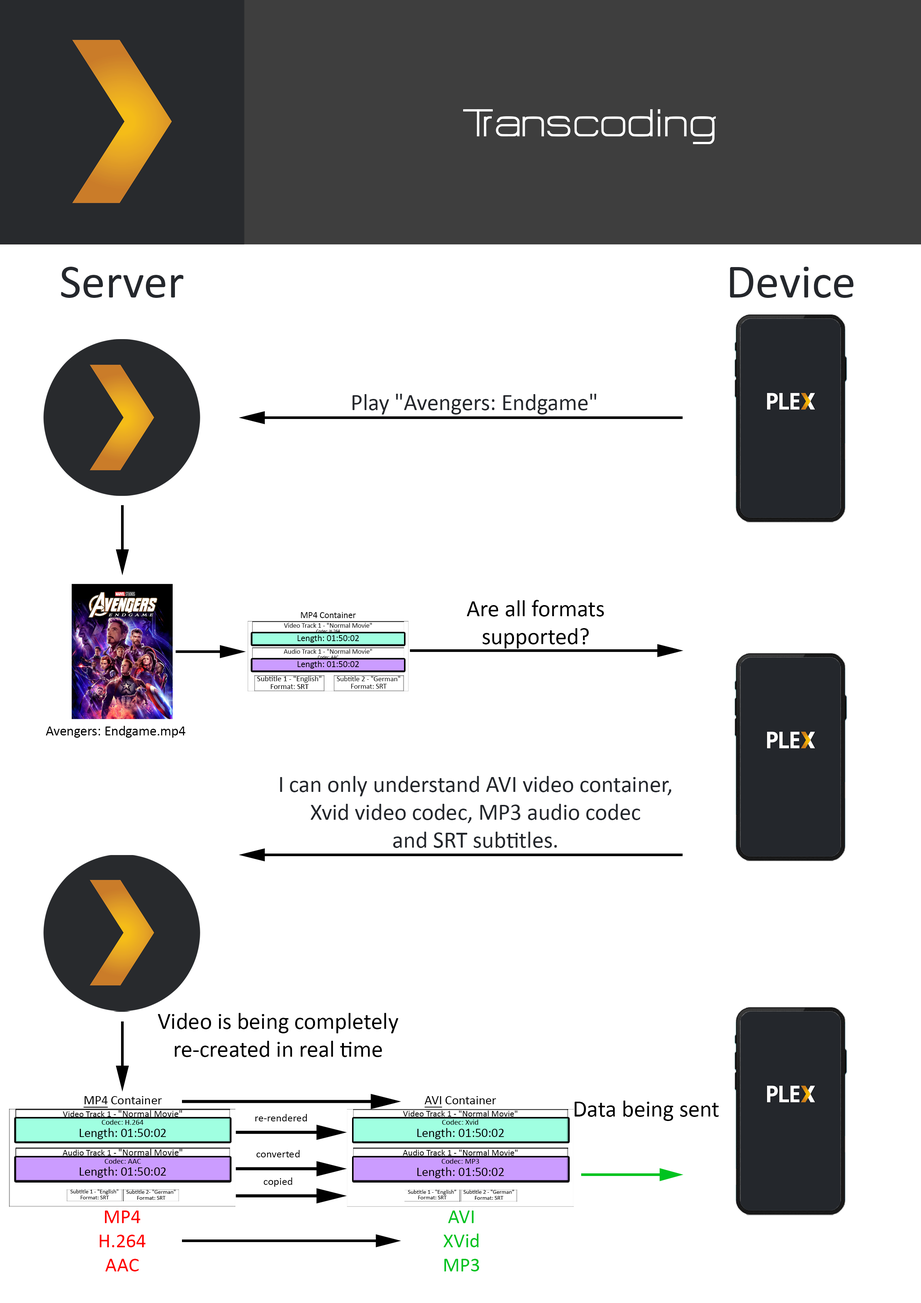
<style>
.page{position:relative;width:921px;height:1303px;background:#ffffff}
.page>*{position:absolute;margin:0}
.t1{font:48px "HURTMOLDPersonalUse-Regular";color:#ffffff}
.t2{font:48px "Calibri";color:#24272c}
.t3{font:23.2px "Calibri";color:#24272c}
.t4{font:23.2px "Calibri";color:#000000}
.t5{font:9.1px "Calibri";color:#000000}
.t6{font:6.9px "Calibri";color:#000000}
.t7{font:4.4px "Calibri";color:#000000}
.t8{font:7.8px "Calibri";color:#000000}
.t9{font:7.4px "Calibri";color:#000000}
.t10{font:13.9px "Calibri";color:#000000}
.t11{font:12.9px "Calibri";color:#000000}
.t12{font:12.9px "Calibri";color:#000000;text-decoration:underline}
.t13{font:9px "Calibri";color:#000000}
.t14{font:9.8px "Calibri";color:#000000}
.t15{font:10.9px "Calibri";color:#000000}
.t16{font:5.9px "Calibri";color:#000000}
.t17{font:20.1px "Calibri";color:#ff0000}
.t18{font:20.1px "Calibri";color:#00c320}
</style>
<div class="page">
<p class="t1" style="left:463px;top:109px;width:253px;height:35px">Transcoding</p>
<p class="t2" style="left:61px;top:267px;width:123px;height:31px">Server</p>
<p class="t2" style="left:730px;top:267px;width:124px;height:31px">Device</p>
<p class="t3" style="left:353px;top:394px;width:244px;height:21px">Play "Avengers: Endgame"</p>
<p class="t4" style="left:467px;top:600px;width:137px;height:49px;text-align:center">Are all formats<br>supported?</p>
<p class="t5" style="left:301px;top:612px;width:55px;height:6px">MP4 Container</p>
<p class="t6" style="left:284px;top:623px;width:88px;height:5px">Video Track 1 - "Normal Movie"</p>
<p class="t7" style="left:316px;top:630px;width:24px;height:3px">Codec: H.264</p>
<p class="t5" style="left:298px;top:635px;width:61px;height:8px">Length: 01:50:02</p>
<p class="t6" style="left:284px;top:649px;width:88px;height:5px">Audio Track 1 - "Normal Movie"</p>
<p class="t5" style="left:298px;top:661px;width:61px;height:8px">Length: 01:50:02</p>
<p class="t7" style="left:318px;top:656px;width:21px;height:3px">Codec: AAC</p>
<p class="t8" style="left:257px;top:676px;width:65px;height:7px">Subtitle 1 - "English"</p>
<p class="t9" style="left:337px;top:676px;width:64px;height:5px">Subtitle 2 - "German"</p>
<p class="t8" style="left:271px;top:684px;width:38px;height:5px">Format: SRT</p>
<p class="t9" style="left:351px;top:684px;width:36px;height:5px">Format: SRT</p>
<p class="t10" style="left:46px;top:726px;width:140px;height:12px">Avengers: Endgame.mp4</p>
<p class="t3" style="left:280px;top:776px;width:392px;height:72px;text-align:center">I can only understand AVI video container,<br>Xvid video codec, MP3 audio codec<br>and SRT subtitles.</p>
<p class="t4" style="left:158px;top:1013px;width:241px;height:44px;text-align:center">Video is being completely<br>re-created in real time</p>
<p class="t11" style="left:84px;top:1096px;width:78px;height:12px"><span class="t12">MP4</span> Container</p>
<p class="t11" style="left:425px;top:1096px;width:71px;height:12px"><span class="t12">AVI</span> Container</p>
<p class="t4" style="left:575px;top:1101px;width:144px;height:20px">Data being sent</p>
<p class="t13" style="left:63px;top:1111px;width:119px;height:6px">Video Track 1 - <span class="t14">"Normal Movie"</span></p>
<p class="t8" style="left:102px;top:1120px;width:42px;height:5px">Codec: H.264</p>
<p class="t15" style="left:255px;top:1114px;width:52px;height:8px">re-rendered</p>
<p class="t13" style="left:403px;top:1111px;width:115px;height:6px">Video Track 1 - "Normal Movie"</p>
<p class="t8" style="left:442px;top:1120px;width:37px;height:5px">Codec: Xvid</p>
<p class="t11" style="left:80px;top:1128px;width:86px;height:12px">Length: 01:50:02</p>
<p class="t11" style="left:417px;top:1128px;width:87px;height:12px">Length: 01:50:02</p>
<p class="t13" style="left:62px;top:1149px;width:120px;height:7px">Audio Track 1 - <span class="t14">"Normal Movie"</span></p>
<p class="t15" style="left:256px;top:1150px;width:44px;height:8px">converted</p>
<p class="t13" style="left:403px;top:1150px;width:115px;height:6px">Audio Track 1 - "Normal Movie"</p>
<p class="t11" style="left:80px;top:1167px;width:86px;height:11px">Length: 01:50:02</p>
<p class="t8" style="left:105px;top:1159px;width:36px;height:5px">Codec: AAC</p>
<p class="t11" style="left:417px;top:1167px;width:87px;height:12px">Length: 01:50:02</p>
<p class="t8" style="left:442px;top:1159px;width:37px;height:5px">Codec: MP3</p>
<p class="t15" style="left:264px;top:1178px;width:28px;height:9px">copied</p>
<p class="t16" style="left:70px;top:1190px;width:49px;height:5px">Subtitle 1 - "English"</p>
<p class="t16" style="left:126px;top:1190px;width:50px;height:4px">Subtitle 2- "German"</p>
<p class="t16" style="left:408px;top:1190px;width:49px;height:5px">Subtitle 1 - "English"</p>
<p class="t16" style="left:464px;top:1190px;width:51px;height:4px">Subtitle 2 - "German"</p>
<p class="t16" style="left:81px;top:1196px;width:28px;height:4px">Format: SRT</p>
<p class="t16" style="left:137px;top:1196px;width:29px;height:4px">Format: SRT</p>
<p class="t16" style="left:418px;top:1196px;width:29px;height:4px">Format: SRT</p>
<p class="t16" style="left:475px;top:1196px;width:29px;height:4px">Format: SRT</p>
<p class="t17" style="left:100px;top:1211px;width:46px;height:61px;text-align:center">MP4<br>H.264<br>AAC</p>
<p class="t18" style="left:444px;top:1211px;width:36px;height:61px;text-align:center">AVI<br>XVid<br>MP3</p>
</div>
